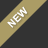
<style>
.page{position:relative;width:48px;height:48px;background:#333333}
.page>*{position:absolute;margin:0}
.t1{font:10px "Arial-BoldMT";color:#ffffff}
</style>
<div class="page">
<p class="t1" style="left:7px;top:6px;width:21px;height:22px;rotate:-45deg">NEW</p>
</div>
